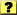
<style>
.page{position:relative;width:17px;height:15px;background:#ffff66}
.page>*{position:absolute;margin:0}
.t1{font:14px "Arial-Black";color:#000000;text-transform:uppercase;font-weight:bold}
</style>
<div class="page">
<p class="t1" style="left:4px;top:2px;width:9px;height:11px">?</p>
</div>
